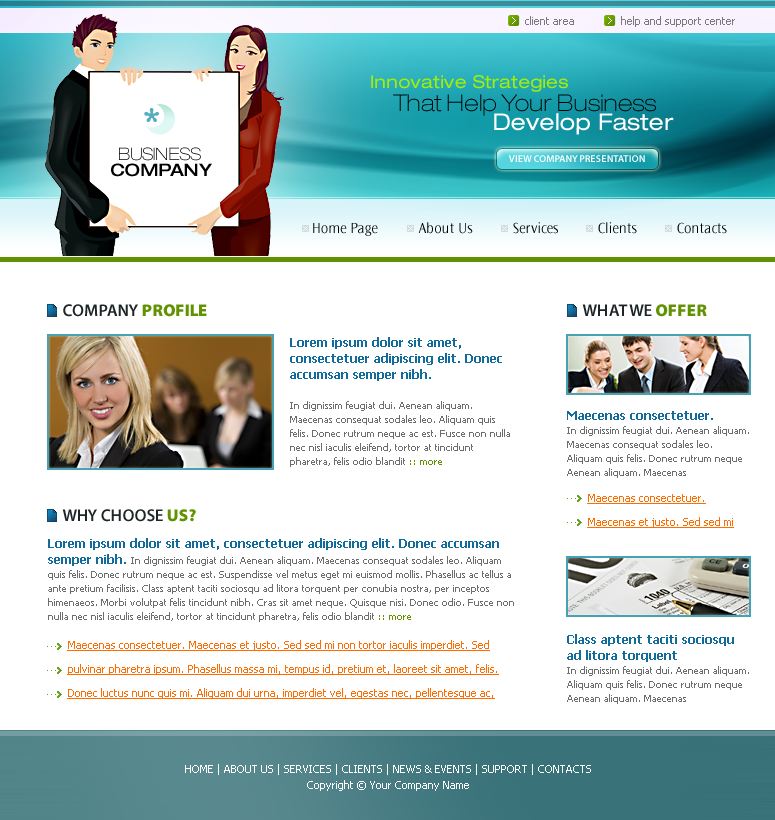
<style>
.page{position:relative;width:775px;height:820px;background:#ffffff}
.page>*{position:absolute;margin:0}
.t1{font:11px "Tahoma";color:#7b7b7b}
.t2{font:18px "HelveticaNeueLTPro-Ex";color:#a2ee09}
.t3{font:23px "HelveticaNeueLTPro-ThEx";color:#000000}
.t4{font:23px "HelveticaNeueLTPro-Ex";color:#ffffff}
.t5{font:17px/16.2px "HelveticaNeueLTPro-ThEx";color:#000000}
.t6{font:17px/16.2px "HelveticaNeueLTPro-MdEx";color:#000000}
.t7{font:10px "MyriadPro-Semibold";color:#ffffff}
.t8{font:15px "OceanSansStd-Light";color:#000000}
.t9{font:17px "MyriadPro-Semibold";color:#1d2527}
.t10{font:17px "MyriadPro-Black";color:#619201}
.t11{font:10px/14px "Tahoma";color:#6d6d6d}
.t12{font:12px/16px "Tahoma-Bold";color:#136b9b}
.t13{font:10px/14px "Tahoma";color:#619201}
.t14{font:11px/24px "Tahoma";color:#ff6c00;text-decoration:underline}
.t15{font:11px/16px "Tahoma";color:#ffffff}
</style>
<div class="page">
<p class="t1" style="left:525px;top:16px;width:49px;height:9px">client area</p>
<p class="t1" style="left:621px;top:16px;width:114px;height:11px">help and support center</p>
<p class="t2" style="left:371px;top:75px;width:197px;height:17px">Innovative Strategies</p>
<p class="t3" style="left:393px;top:94px;width:263px;height:22px">That Help Your Business</p>
<p class="t4" style="left:494px;top:113px;width:180px;height:22px">Develop Faster</p>
<p class="t5" style="left:111px;top:147px;width:101px;height:30px;text-align:center">BUSINESS<br> <span class="t6">COMPANY</span></p>
<p class="t7" style="left:508px;top:155px;width:137px;height:7px">VIEW COMPANY PRESENTATION</p>
<p class="t8" style="left:418px;top:222px;width:55px;height:12px">About Us</p>
<p class="t8" style="left:513px;top:222px;width:45px;height:12px">Services</p>
<p class="t8" style="left:598px;top:222px;width:39px;height:12px">Clients</p>
<p class="t8" style="left:677px;top:222px;width:50px;height:12px">Contacts</p>
<p class="t8" style="left:313px;top:223px;width:65px;height:13px">Home Page</p>
<p class="t9" style="left:63px;top:304px;width:144px;height:13px">COMPANY <span class="t10">PROFILE</span></p>
<p class="t9" style="left:582px;top:304px;width:125px;height:13px">WHAT WE <span class="t10">OFFER</span></p>
<p class="t11" style="left:290px;top:337px;width:220px;height:130px"><span class="t12">Lorem ipsum dolor sit amet, consectetuer adipiscing elit. Donec accumsan semper nibh. <br><br></span>In dignissim feugiat dui. Aenean aliquam. Maecenas consequat sodales leo. Aliquam quis felis. Donec rutrum neque ac est. Fusce non nulla nec nisl iaculis eleifend, tortor at tincidunt pharetra, felis odio blandit <span class="t13">:: more</span></p>
<p class="t11" style="left:567px;top:411px;width:182px;height:67px"><span class="t12">Maecenas consectetuer.<br></span>In dignissim feugiat dui. Aenean aliquam. Maecenas consequat sodales leo. Aliquam quis felis. Donec rutrum neque Aenean aliquam. Maecenas</p>
<p class="t14" style="left:587px;top:494px;width:147px;height:34px">Maecenas consectetuer. Maecenas et justo. Sed sed mi</p>
<p class="t9" style="left:62px;top:509px;width:134px;height:13px">WHY CHOOSE <span class="t10">US?</span></p>
<p class="t11" style="left:48px;top:538px;width:466px;height:84px"><span class="t12">Lorem ipsum dolor sit amet, consectetuer adipiscing elit. Donec accumsan semper nibh. </span>In dignissim feugiat dui. Aenean aliquam. Maecenas consequat sodales leo. Aliquam quis felis. Donec rutrum neque ac est. Suspendisse vel metus eget mi euismod mollis. Phasellus ac tellus a ante pretium facilisis. Class aptent taciti sociosqu ad litora torquent per conubia nostra, per inceptos himenaeos. Morbi volutpat felis tincidunt nibh. Cras sit amet neque. Quisque nisi. Donec odio. Fusce non nulla nec nisl iaculis eleifend, tortor at tincidunt pharetra, felis odio blandit <span class="t13">:: more</span></p>
<p class="t14" style="left:67px;top:640px;width:432px;height:59px">Maecenas consectetuer. Maecenas et justo. Sed sed mi non tortor iaculis imperdiet. Sed pulvinar pharetra ipsum. Phasellus massa mi, tempus id, pretium et, laoreet sit amet, felis. Donec luctus nunc quis mi. Aliquam dui urna, imperdiet vel, egestas nec, pellentesque ac,</p>
<p class="t11" style="left:567px;top:634px;width:182px;height:70px"><span class="t12">Class aptent taciti sociosqu ad litora torquent <br></span>In dignissim feugiat dui. Aenean aliquam. Aliquam quis felis. Donec rutrum neque Aenean aliquam. Maecenas</p>
<p class="t15" style="left:185px;top:764px;width:406px;height:27px;text-align:center">HOME | ABOUT US | SERVICES | CLIENTS | NEWS &amp; EVENTS | SUPPORT | CONTACTS<br>Copyright © Your Company Name</p>
</div>
